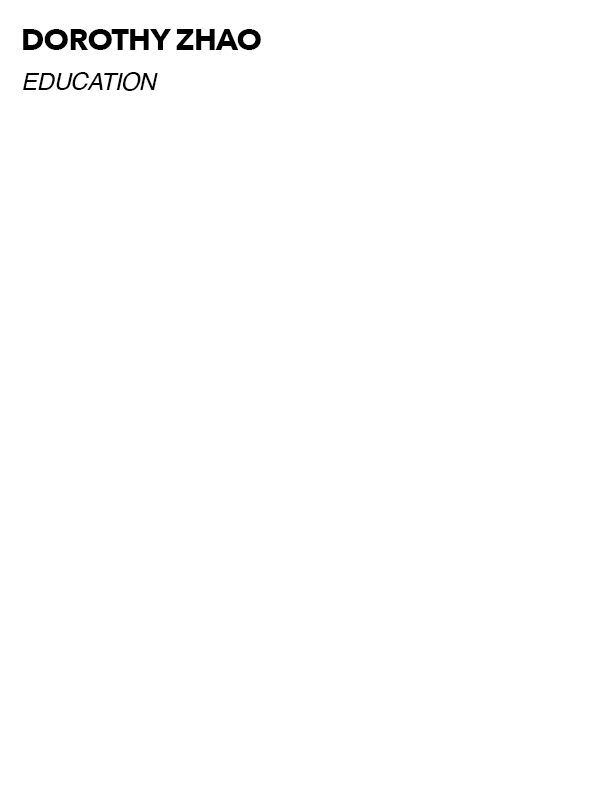
<style>
.page{position:relative;width:612px;height:792px;background:#ffffff}
.page>*{position:absolute;margin:0}
.t1{font:30px "AvenirNext-Bold";letter-spacing:-0.025em;color:#000000}
.t2{font:24px "Helvetica-Oblique";letter-spacing:-0.025em;color:#000000}
</style>
<div class="page">
<p class="t1" style="left:23px;top:29px;width:238px;height:21px">DOROTHY ZHAO</p>
<p class="t2" style="left:23px;top:72px;width:135px;height:19px">EDUCATION</p>
</div>
